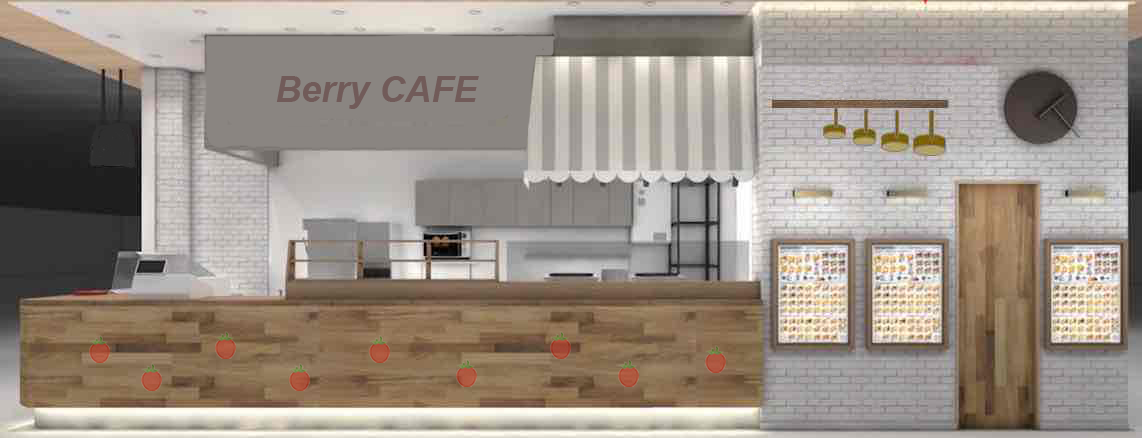
<style>
.page{position:relative;width:1142px;height:438px}
.page>*{position:absolute;margin:0}
.t1{font:36px "Arial-BoldItalicMT";color:#715b59}
</style>
<div class="page">
<p class="t1" style="left:276px;top:76px;width:203px;height:33px">Berry CAFE</p>
</div>
